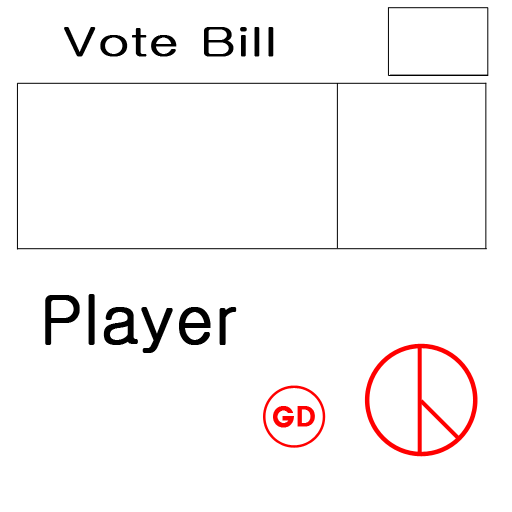
<style>
.page{position:relative;width:512px;height:512px;background:#ffffff}
.page>*{position:absolute;margin:0}
.t1{font:40.3px "Gulim";color:#000000;font-weight:bold;scale:1.32 1}
.t2{font:66.7px "Gulim";color:#000000;font-weight:bold}
.t3{font:26.7px "HYwulB";color:#ff0000;font-weight:bold}
</style>
<div class="page">
<p class="t1" style="left:64px;top:27px;width:210px;height:30px">Vote Bill</p>
<p class="t2" style="left:45px;top:294px;width:192px;height:59px">Player</p>
<p class="t3" style="left:273px;top:406px;width:42px;height:22px">GD</p>
</div>
